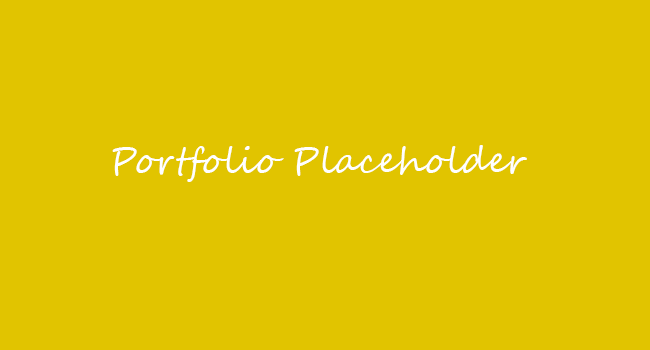
<style>
.page{position:relative;width:650px;height:350px;background:#e1c400}
.page>*{position:absolute;margin:0}
.t1{font:36px "SegoeScript";color:#ffffff}
</style>
<div class="page">
<p class="t1" style="left:112px;top:145px;width:415px;height:37px">Portfolio Placeholder</p>
</div>
